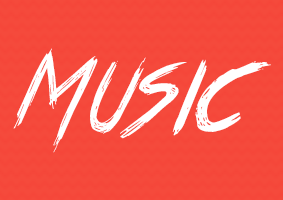
<style>
.page{position:relative;width:283px;height:200px;background:#f54a3c}
.page>*{position:absolute;margin:0}
.t1{font:100px "TrueLies";color:#ffffff}
</style>
<div class="page">
<p class="t1" style="left:13px;top:48px;width:258px;height:105px">Music</p>
</div>
